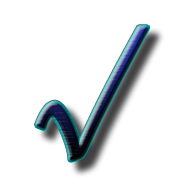
<style>
.page{position:relative;width:192px;height:192px;background:#ffffff}
.page>*{position:absolute;margin:0}
.t1{font:140px "LucidaHandwriting-Italic"}
</style>
<div class="page">
<p class="t1" style="left:37px;top:27px;width:111px;height:133px">√</p>
</div>
